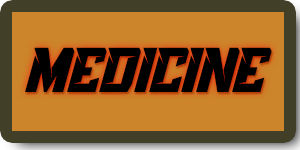
<style>
.page{position:relative;width:300px;height:150px;background:#cc852a}
.page>*{position:absolute;margin:0}
.t1{font:72px "BringRace";letter-spacing:0.025em;color:#000000;scale:0.44 1}
</style>
<div class="page">
<p class="t1" style="left:25px;top:47px;width:247px;height:45px">MEDICINE</p>
</div>
